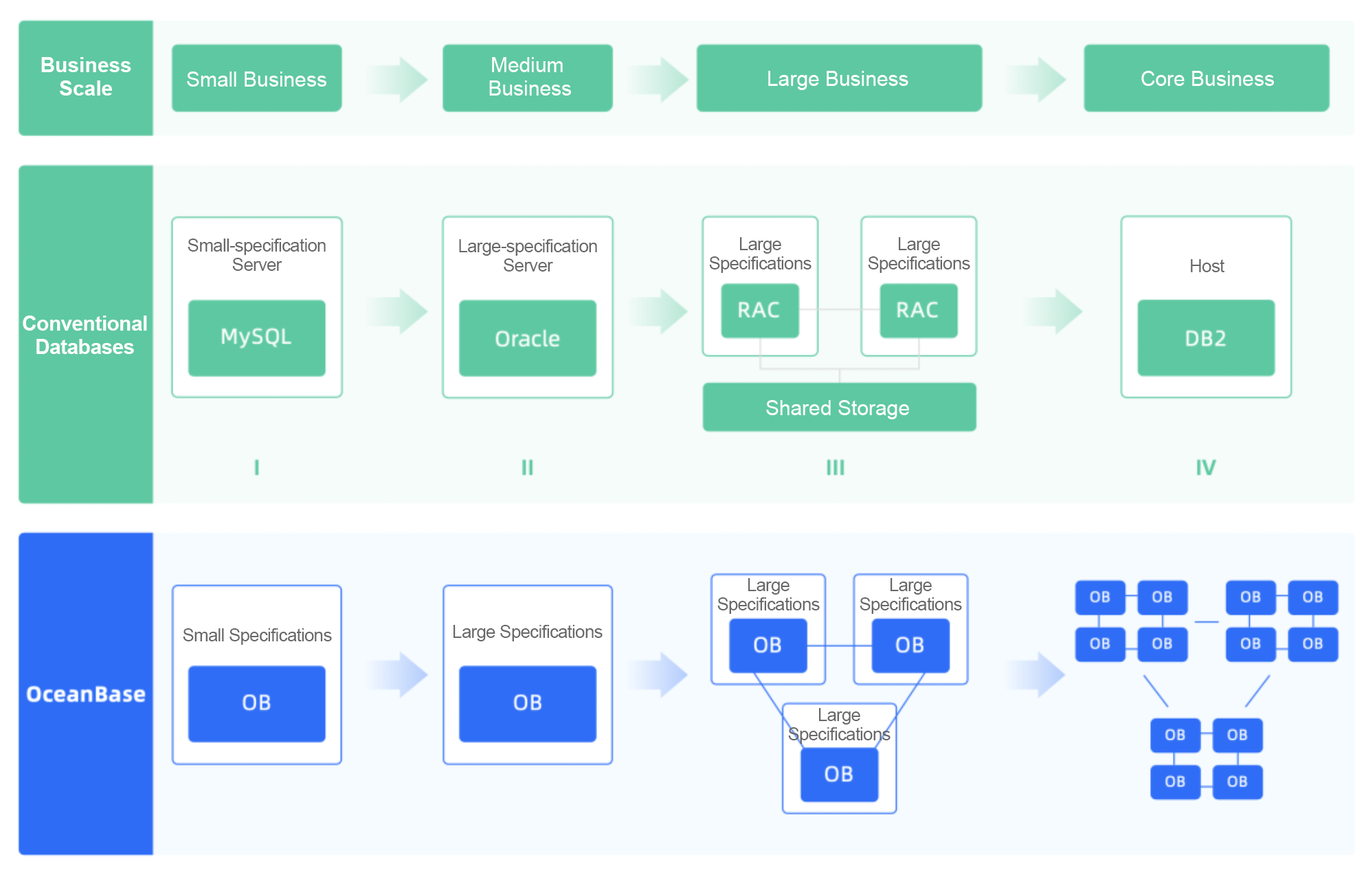
<style>
.page{position:relative;width:1366px;height:873px;background:#f6fcfa}
.page>*{position:absolute;margin:0}
.t1{font:20.6px/23.4px "Arial-BoldMT";color:#fefefe}
.t2{font:20.6px/23.4px "ArialMT";color:#fefefe}
.t3{font:20.6px "ArialMT";color:#fefefe}
.t4{font:17.9px/19.2px "ArialMT";letter-spacing:-0.03em;color:#686868}
.t5{font:17.9px "ArialMT";letter-spacing:-0.03em;color:#686868}
.t6{font:20.6px/23.4px "Arial-BoldMT";letter-spacing:-0.02em;color:#fefefe}
</style>
<div class="page">
<p class="t1" style="left:41px;top:57px;width:90px;height:39px;text-align:center">Business Scale</p>
<p class="t2" style="left:489px;top:57px;width:82px;height:39px;text-align:center">Medium <br>Business</p>
<p class="t3" style="left:187px;top:71px;width:139px;height:16px">Small Business</p>
<p class="t3" style="left:768px;top:71px;width:141px;height:19px">Large Business</p>
<p class="t3" style="left:1142px;top:71px;width:132px;height:15px">Core Business</p>
<p class="t4" style="left:188px;top:238px;width:138px;height:33px;text-align:center">Small-specification Server</p>
<p class="t4" style="left:459px;top:239px;width:138px;height:32px;text-align:center">Large-specification Server</p>
<p class="t4" style="left:709px;top:237px;width:103px;height:36px;text-align:center">Large Specifications</p>
<p class="t4" style="left:868px;top:237px;width:102px;height:36px;text-align:center">Large Specifications</p>
<p class="t5" style="left:1191px;top:259px;width:34px;height:13px">Host</p>
<p class="t6" style="left:23px;top:315px;width:124px;height:39px;text-align:center">Conventional Databases</p>
<p class="t3" style="left:766px;top:400px;width:143px;height:19px">Shared Storage</p>
<p class="t4" style="left:717px;top:578px;width:103px;height:36px;text-align:center">Large Specifications</p>
<p class="t4" style="left:860px;top:578px;width:102px;height:36px;text-align:center">Large Specifications</p>
<p class="t5" style="left:183px;top:628px;width:149px;height:17px">Small Specifications</p>
<p class="t5" style="left:454px;top:625px;width:149px;height:16px">Large Specifications</p>
<p class="t4" style="left:788px;top:708px;width:103px;height:36px;text-align:center">Large Specifications</p>
</div>
